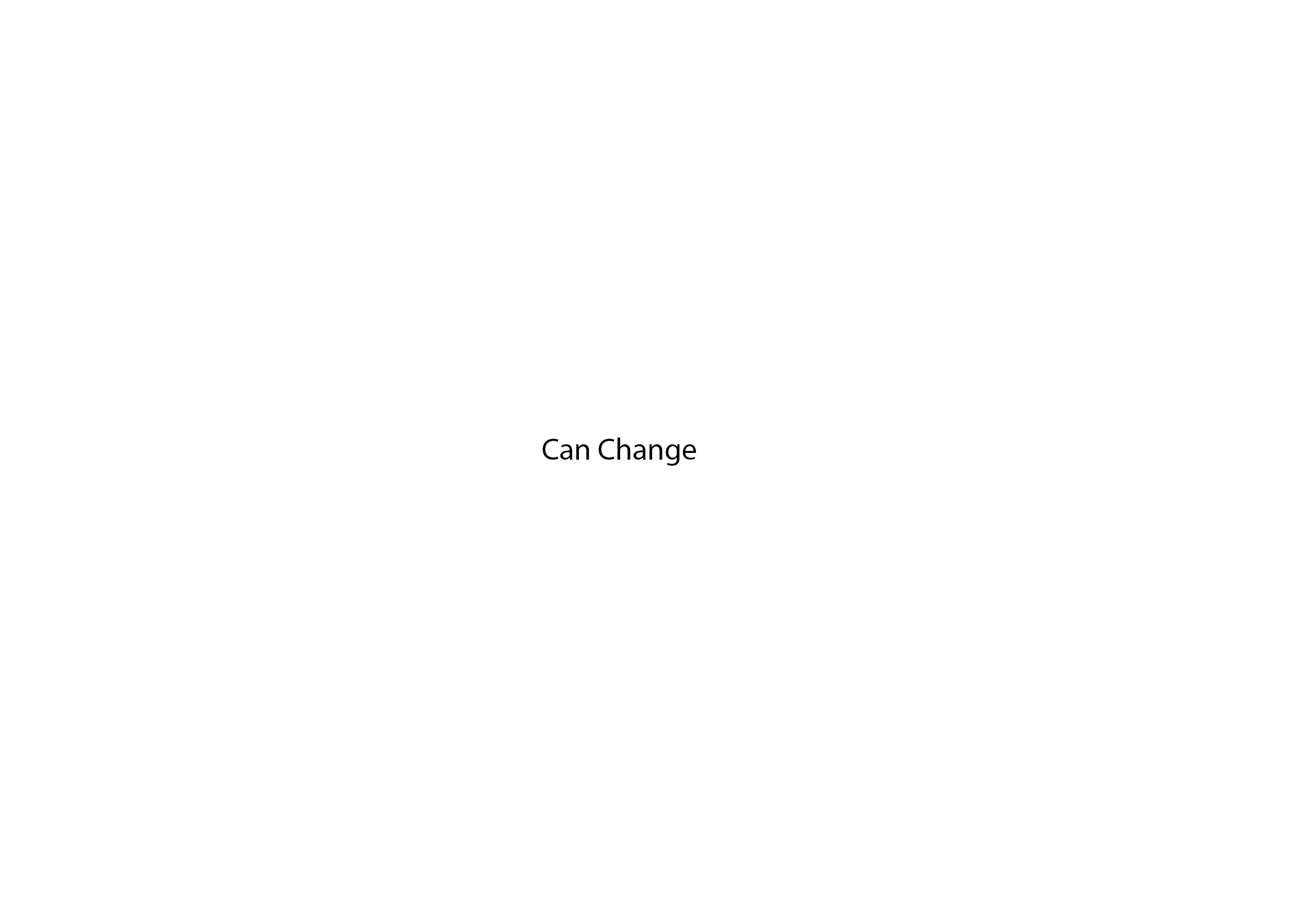
<style>
.page{position:relative;width:1292px;height:923px;background:#ffffff}
.page>*{position:absolute;margin:0}
.t1{font:30.8px "MyriadPro-Regular";color:#000000}
</style>
<div class="page">
<p class="t1" style="left:543px;top:437px;width:153px;height:29px">Can Change</p>
</div>
